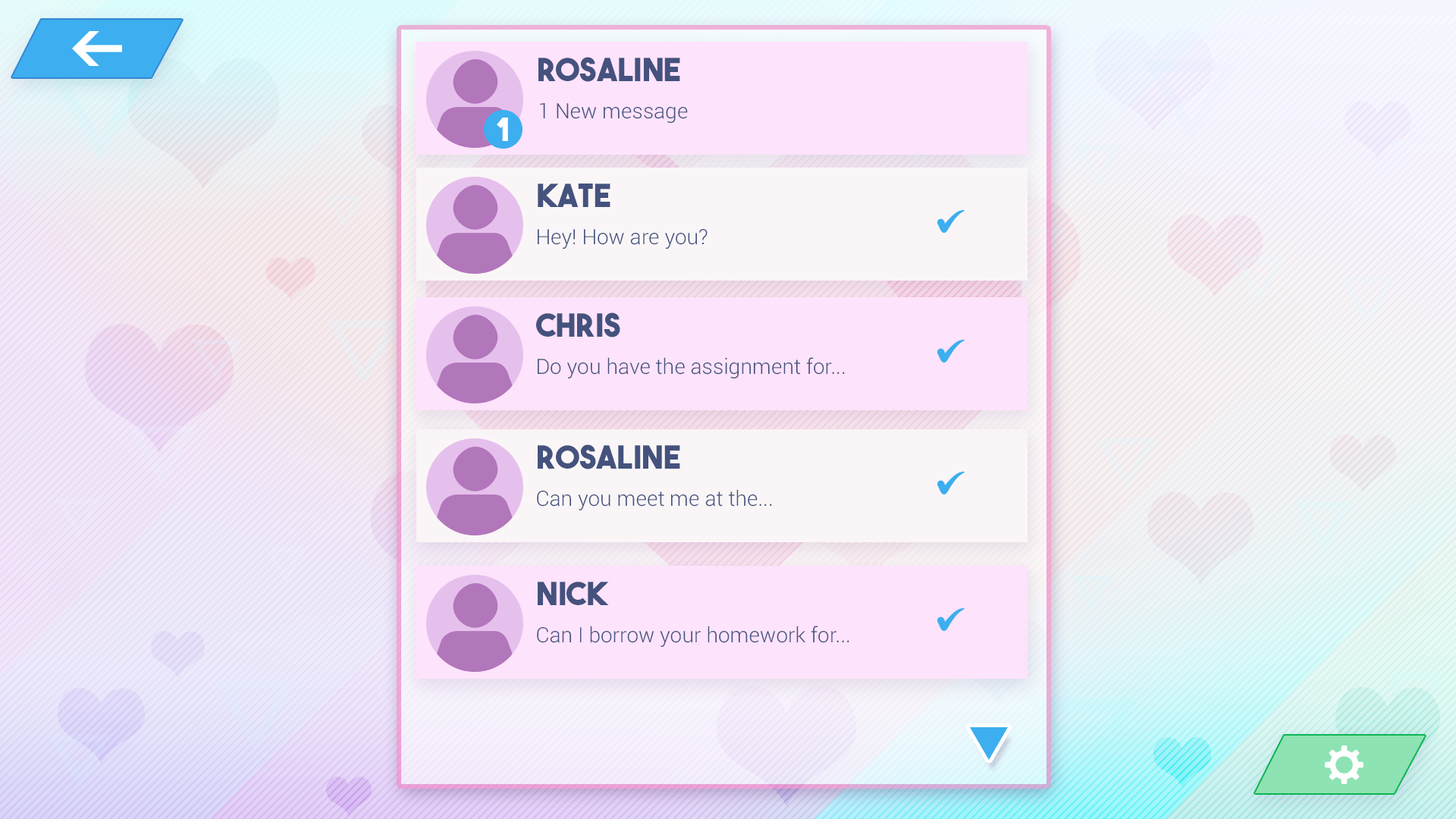
<style>
.page{position:relative;width:1456px;height:819px}
.page>*{position:absolute;margin:0}
.t1{font:31.9px "TheBoldFont";color:#44527d}
.t2{font:21.3px "Roboto-Light";color:#44527d}
.t3{font:31.9px "TheBoldFont";color:#ffffff}
</style>
<div class="page">
<p class="t1" style="left:538px;top:57px;width:142px;height:25px">Rosaline</p>
<p class="t2" style="left:540px;top:103px;width:148px;height:20px">1 New message</p>
<p class="t3" style="left:497px;top:118px;width:11px;height:23px">1</p>
<p class="t1" style="left:538px;top:184px;width:72px;height:23px">Kate</p>
<p class="t2" style="left:538px;top:229px;width:170px;height:20px">Hey! How are you?</p>
<p class="t1" style="left:536px;top:312px;width:84px;height:25px">Chris</p>
<p class="t2" style="left:538px;top:357px;width:307px;height:21px">Do you have the assignment for...</p>
<p class="t1" style="left:538px;top:444px;width:142px;height:25px">Rosaline</p>
<p class="t2" style="left:537px;top:489px;width:235px;height:21px">Can you meet me at the...</p>
<p class="t1" style="left:538px;top:582px;width:71px;height:23px">Nick</p>
<p class="t2" style="left:537px;top:626px;width:312px;height:21px">Can I borrow your homework for...</p>
</div>
